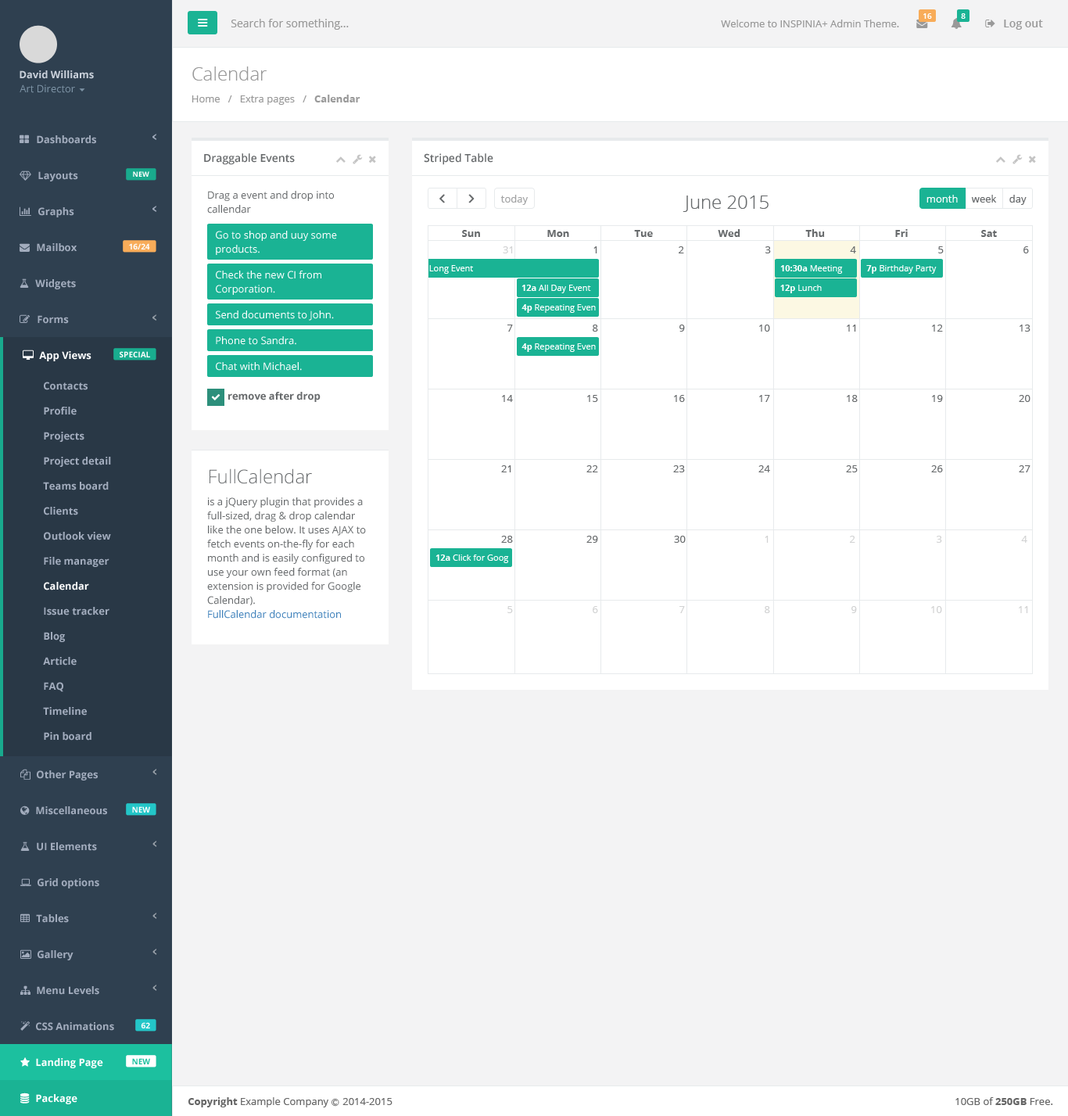
<style>
.page{position:relative;width:1068px;height:1116px;background:#ffffff}
.page>*{position:absolute;margin:0}
.t1{font:7.8px "OpenSans-Semibold";color:#ffffff}
.t2{font:11px "OpenSans";color:#999999}
.t3{font:10.2px "OpenSans";color:#999999}
.t4{font:11px "OpenSans-Semibold";color:#999999}
.t5{font:10.2px "OpenSans-Bold";color:#cad1db}
.t6{font:18.8px "OpenSans-Light";color:#999999}
.t7{font:10.2px "OpenSans";color:#7d93a5}
.t8{font:10.2px "OpenSans";color:#676a6c}
.t9{font:10.2px "OpenSans-Bold";color:#676a6c}
.t10{font:10.2px "OpenSans-Bold";color:#a2acbd}
.t11{font:11px "OpenSans-Semibold";color:#676a6c}
.t12{font:7px "OpenSans-Bold";color:#fefefe}
.t13{font:10.2px/14.1px "OpenSans";color:#676a6c}
.t14{font:10.2px "OpenSans";color:#a3a4a5}
.t15{font:18.8px "OpenSans-Light";color:#676a6c}
.t16{font:10.2px "OpenSans";color:#ffffff}
.t17{font:10.2px/14.1px "OpenSans";color:#ffffff}
.t18{font:7.8px "OpenSans-Bold";color:#fefefe}
.t19{font:10.2px "OpenSans";color:#d1d2d3}
.t20{font:8.6px "OpenSans";color:#ffffff}
.t21{font:8.6px "OpenSans-Bold";color:#ffffff}
.t22{font:10.2px "OpenSans-Bold";color:#ffffff}
.t23{font:10.2px/14.1px "OpenSans";color:#4284bc}
.t24{font:7.8px "OpenSans-Bold";color:#1cc09f}
.t25{font:10.2px "OpenSans";color:#666666}
.t26{font:10.2px "OpenSans-Bold";color:#666666}
.t27{font:7.8px "Meiryo";color:#666666}
</style>
<div class="page">
<p class="t1" style="left:924px;top:13px;width:8px;height:6px">16</p>
<p class="t1" style="left:961px;top:13px;width:5px;height:6px">8</p>
<p class="t2" style="left:231px;top:19px;width:118px;height:11px">Search for something...</p>
<p class="t3" style="left:721px;top:20px;width:178px;height:7px">Welcome to INSPINIA+ Admin Theme.</p>
<p class="t4" style="left:1004px;top:20px;width:39px;height:10px">Log out</p>
<p class="t5" style="left:20px;top:70px;width:74px;height:9px">David Williams</p>
<p class="t6" style="left:192px;top:66px;width:75px;height:15px">Calendar</p>
<p class="t7" style="left:20px;top:84px;width:55px;height:9px">Art Director</p>
<p class="t8" style="left:192px;top:95px;width:169px;height:10px"><span class="t3">Home   /   </span>Extra pages   / <span class="t9">  Calendar</span></p>
<p class="t10" style="left:37px;top:135px;width:59px;height:9px">Dashboards</p>
<p class="t11" style="left:204px;top:153px;width:91px;height:12px">Draggable Events</p>
<p class="t11" style="left:424px;top:153px;width:70px;height:12px">Striped Table</p>
<p class="t10" style="left:38px;top:171px;width:40px;height:10px">Layouts</p>
<p class="t12" style="left:133px;top:171px;width:16px;height:6px">NEW</p>
<p class="t13" style="left:207px;top:191px;width:127px;height:23px">Drag a event and drop into<br>callendar</p>
<p class="t14" style="left:501px;top:195px;width:27px;height:10px">today</p>
<p class="t15" style="left:683px;top:196px;width:86px;height:16px">June 2015</p>
<p class="t16" style="left:927px;top:195px;width:31px;height:8px">month</p>
<p class="t8" style="left:971px;top:195px;width:26px;height:8px">week</p>
<p class="t8" style="left:1010px;top:195px;width:17px;height:10px">day</p>
<p class="t10" style="left:38px;top:207px;width:36px;height:10px">Graphs</p>
<p class="t17" style="left:216px;top:231px;width:121px;height:24px">Go to shop and uuy some<br>products.</p>
<p class="t9" style="left:462px;top:230px;width:18px;height:7px">Sun</p>
<p class="t9" style="left:547px;top:230px;width:22px;height:7px">Mon</p>
<p class="t9" style="left:634px;top:230px;width:19px;height:7px">Tue</p>
<p class="t9" style="left:718px;top:229px;width:23px;height:8px">Wed</p>
<p class="t9" style="left:806px;top:229px;width:19px;height:8px">Thu</p>
<p class="t9" style="left:896px;top:229px;width:12px;height:8px">Fri</p>
<p class="t9" style="left:982px;top:230px;width:15px;height:7px">Sat</p>
<p class="t10" style="left:37px;top:243px;width:40px;height:9px">Mailbox</p>
<p class="t18" style="left:129px;top:243px;width:21px;height:6px">16/24</p>
<p class="t19" style="left:503px;top:246px;width:10px;height:7px">31</p>
<p class="t8" style="left:594px;top:246px;width:4px;height:7px">1</p>
<p class="t8" style="left:679px;top:246px;width:5px;height:7px">2</p>
<p class="t8" style="left:766px;top:246px;width:5px;height:7px">3</p>
<p class="t8" style="left:850px;top:246px;width:6px;height:7px">4</p>
<p class="t8" style="left:939px;top:246px;width:5px;height:7px">5</p>
<p class="t8" style="left:1024px;top:246px;width:5px;height:7px">6</p>
<p class="t20" style="left:429px;top:265px;width:44px;height:9px">Long Event</p>
<p class="t20" style="left:781px;top:265px;width:62px;height:9px"><span class="t21">10:30a</span> Meeting</p>
<p class="t20" style="left:867px;top:265px;width:70px;height:9px"><span class="t21">7p</span> Birthday Party</p>
<p class="t10" style="left:35px;top:279px;width:41px;height:10px">Widgets</p>
<p class="t17" style="left:216px;top:271px;width:105px;height:24px">Check the new CI from<br>Corporation.</p>
<p class="t20" style="left:522px;top:285px;width:69px;height:8px"><span class="t21">12a</span> All Day Event</p>
<p class="t20" style="left:781px;top:285px;width:41px;height:8px"><span class="t21">12p</span> Lunch</p>
<p class="t20" style="left:522px;top:304px;width:74px;height:9px"><span class="t21">4p </span>Repeating Even</p>
<p class="t10" style="left:38px;top:315px;width:31px;height:9px">Forms</p>
<p class="t16" style="left:216px;top:311px;width:118px;height:10px">Send documents to John.</p>
<p class="t8" style="left:508px;top:325px;width:5px;height:7px">7</p>
<p class="t8" style="left:593px;top:325px;width:5px;height:7px">8</p>
<p class="t8" style="left:680px;top:325px;width:5px;height:7px">9</p>
<p class="t8" style="left:759px;top:325px;width:11px;height:7px">10</p>
<p class="t8" style="left:847px;top:325px;width:9px;height:7px">11</p>
<p class="t8" style="left:932px;top:325px;width:11px;height:7px">12</p>
<p class="t8" style="left:1020px;top:325px;width:11px;height:7px">13</p>
<p class="t16" style="left:216px;top:336px;width:80px;height:9px">Phone to Sandra.</p>
<p class="t22" style="left:39px;top:351px;width:53px;height:10px">App Views</p>
<p class="t18" style="left:120px;top:351px;width:30px;height:6px">SPECIAL</p>
<p class="t20" style="left:522px;top:343px;width:74px;height:9px"><span class="t21">4p </span>Repeating Even</p>
<p class="t16" style="left:216px;top:362px;width:86px;height:9px">Chat with Michael.</p>
<p class="t10" style="left:44px;top:382px;width:44px;height:8px">Contacts</p>
<p class="t9" style="left:228px;top:392px;width:93px;height:10px">remove after drop</p>
<p class="t8" style="left:502px;top:395px;width:11px;height:7px">14</p>
<p class="t8" style="left:587px;top:395px;width:11px;height:7px">15</p>
<p class="t8" style="left:674px;top:395px;width:11px;height:7px">16</p>
<p class="t8" style="left:759px;top:395px;width:11px;height:7px">17</p>
<p class="t8" style="left:847px;top:395px;width:11px;height:7px">18</p>
<p class="t8" style="left:932px;top:395px;width:11px;height:7px">19</p>
<p class="t8" style="left:1019px;top:395px;width:12px;height:7px">20</p>
<p class="t10" style="left:44px;top:407px;width:33px;height:8px">Profile</p>
<p class="t10" style="left:44px;top:432px;width:40px;height:10px">Projects</p>
<p class="t10" style="left:44px;top:457px;width:67px;height:10px">Project detail</p>
<p class="t15" style="left:210px;top:468px;width:102px;height:16px">FullCalendar</p>
<p class="t8" style="left:501px;top:465px;width:11px;height:7px">21</p>
<p class="t8" style="left:587px;top:465px;width:11px;height:7px">22</p>
<p class="t8" style="left:673px;top:465px;width:12px;height:7px">23</p>
<p class="t8" style="left:759px;top:465px;width:11px;height:7px">24</p>
<p class="t8" style="left:846px;top:465px;width:12px;height:7px">25</p>
<p class="t8" style="left:932px;top:465px;width:11px;height:7px">26</p>
<p class="t8" style="left:1019px;top:465px;width:12px;height:7px">27</p>
<p class="t10" style="left:43px;top:482px;width:66px;height:8px">Teams board</p>
<p class="t13" style="left:207px;top:497px;width:159px;height:122px">is a jQuery plugin that provides a full-sized, drag &amp; drop calendar like the one below. It uses AJAX to fetch events on-the-fly for each month and is easily configured to use your own feed format (an extension is provided for Google Calendar).<br><span class="t23">FullCalendar documentation</span></p>
<p class="t10" style="left:44px;top:507px;width:34px;height:8px">Clients</p>
<p class="t10" style="left:44px;top:532px;width:67px;height:8px">Outlook view</p>
<p class="t8" style="left:501px;top:536px;width:12px;height:7px">28</p>
<p class="t8" style="left:587px;top:536px;width:11px;height:7px">29</p>
<p class="t8" style="left:674px;top:536px;width:12px;height:7px">30</p>
<p class="t19" style="left:765px;top:536px;width:4px;height:7px">1</p>
<p class="t19" style="left:850px;top:536px;width:6px;height:7px">2</p>
<p class="t19" style="left:937px;top:536px;width:5px;height:7px">3</p>
<p class="t19" style="left:1021px;top:536px;width:7px;height:7px">4</p>
<p class="t10" style="left:44px;top:557px;width:65px;height:10px">File manager</p>
<p class="t20" style="left:436px;top:555px;width:73px;height:8px"><span class="t21">12a</span> Click for Goog</p>
<p class="t22" style="left:44px;top:582px;width:45px;height:9px">Calendar</p>
<p class="t10" style="left:44px;top:607px;width:65px;height:9px">Issue tracker</p>
<p class="t19" style="left:508px;top:606px;width:5px;height:7px">5</p>
<p class="t19" style="left:593px;top:606px;width:5px;height:7px">6</p>
<p class="t19" style="left:680px;top:606px;width:5px;height:7px">7</p>
<p class="t19" style="left:765px;top:606px;width:5px;height:7px">8</p>
<p class="t19" style="left:852px;top:606px;width:5px;height:7px">9</p>
<p class="t19" style="left:932px;top:606px;width:10px;height:7px">10</p>
<p class="t19" style="left:1019px;top:606px;width:10px;height:7px">11</p>
<p class="t10" style="left:44px;top:632px;width:21px;height:10px">Blog</p>
<p class="t10" style="left:43px;top:657px;width:34px;height:9px">Article</p>
<p class="t10" style="left:44px;top:682px;width:19px;height:10px">FAQ</p>
<p class="t10" style="left:43px;top:707px;width:44px;height:9px">Timeline</p>
<p class="t10" style="left:44px;top:732px;width:48px;height:9px">Pin board</p>
<p class="t10" style="left:37px;top:770px;width:61px;height:11px">Other Pages</p>
<p class="t10" style="left:36px;top:806px;width:71px;height:9px">Miscellaneous</p>
<p class="t18" style="left:132px;top:806px;width:18px;height:7px">NEW</p>
<p class="t10" style="left:37px;top:842px;width:60px;height:9px">UI Elements</p>
<p class="t10" style="left:38px;top:878px;width:61px;height:11px">Grid options</p>
<p class="t10" style="left:36px;top:914px;width:33px;height:9px">Tables</p>
<p class="t10" style="left:38px;top:950px;width:36px;height:10px">Gallery</p>
<p class="t10" style="left:37px;top:986px;width:62px;height:9px">Menu Levels</p>
<p class="t10" style="left:36px;top:1022px;width:78px;height:9px">CSS Animations</p>
<p class="t18" style="left:141px;top:1022px;width:9px;height:7px">62</p>
<p class="t22" style="left:36px;top:1058px;width:67px;height:10px">Landing Page</p>
<p class="t24" style="left:132px;top:1058px;width:18px;height:6px">NEW</p>
<p class="t22" style="left:36px;top:1094px;width:41px;height:10px">Package</p>
<p class="t25" style="left:188px;top:1097px;width:205px;height:10px"><span class="t26">Copyright</span> Example Company <span class="t27">Ⓒ </span>2014-2015</p>
<p class="t25" style="left:956px;top:1097px;width:98px;height:8px">10GB of <span class="t26">250GB</span> Free.</p>
</div>
